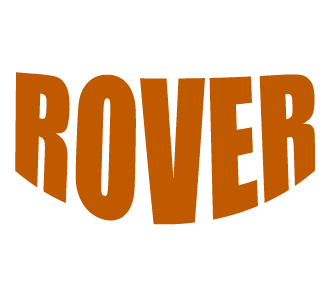
<style>
.page{position:relative;width:330px;height:300px;background:#ffffff}
.page>*{position:absolute;margin:0}
.t1{font:120px "Impact";color:#bf5a00}
</style>
<div class="page">
<p class="t1" style="left:15px;top:72px;width:300px;height:153px">ROVER</p>
</div>
